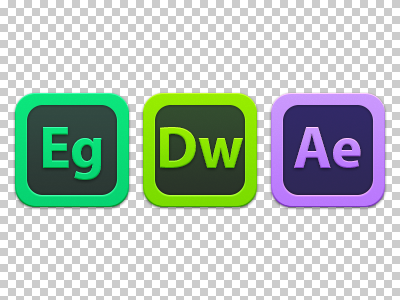
<style>
.page{position:relative;width:400px;height:300px;background:#cccccc}
.page>*{position:absolute;margin:0}
.t1{font:60px "MyriadPro-Bold";color:#09dc76}
.t2{font:60px "MyriadPro-Bold";color:#86e300}
.t3{font:60.2px "MyriadPro-Bold";color:#c083fd}
</style>
<div class="page">
<p class="t1" style="left:43px;top:127px;width:59px;height:53px">Eg</p>
<p class="t2" style="left:160px;top:127px;width:83px;height:41px">Dw</p>
<p class="t3" style="left:294px;top:127px;width:67px;height:41px">Ae</p>
</div>
